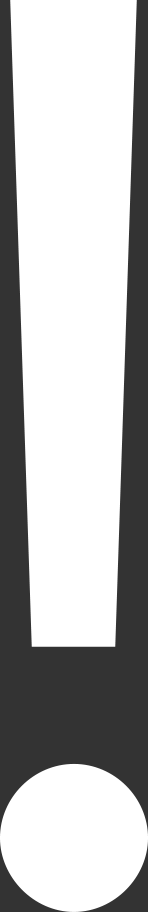
<style>
.page{position:relative;width:148px;height:912px;background:#ffffff}
.page>*{position:absolute;margin:0}
.t1{font:1346.5px "ProximaNova-Regular";color:#ffffff}
</style>
<div class="page">
<p class="t1" style="left:0px;top:0px;width:148px;height:912px">!</p>
</div>
